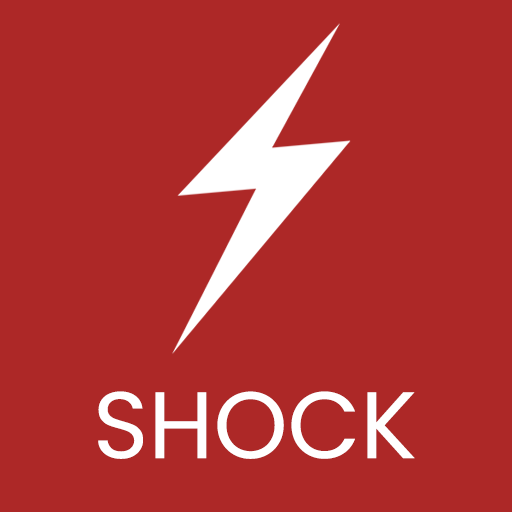
<style>
.page{position:relative;width:512px;height:512px;background:#ad2827}
.page>*{position:absolute;margin:0}
.t1{font:94.2px "Poppins-Regular";color:#ffffff}
</style>
<div class="page">
<p class="t1" style="left:98px;top:391px;width:317px;height:68px">SHOCK</p>
</div>
